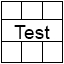
<style>
.page{position:relative;width:64px;height:64px;background:#ffffff}
.page>*{position:absolute;margin:0}
.t1{font:19.4px "ArialMT";color:#000000}
</style>
<div class="page">
<p class="t1" style="left:14px;top:25px;width:36px;height:14px">Test</p>
</div>
